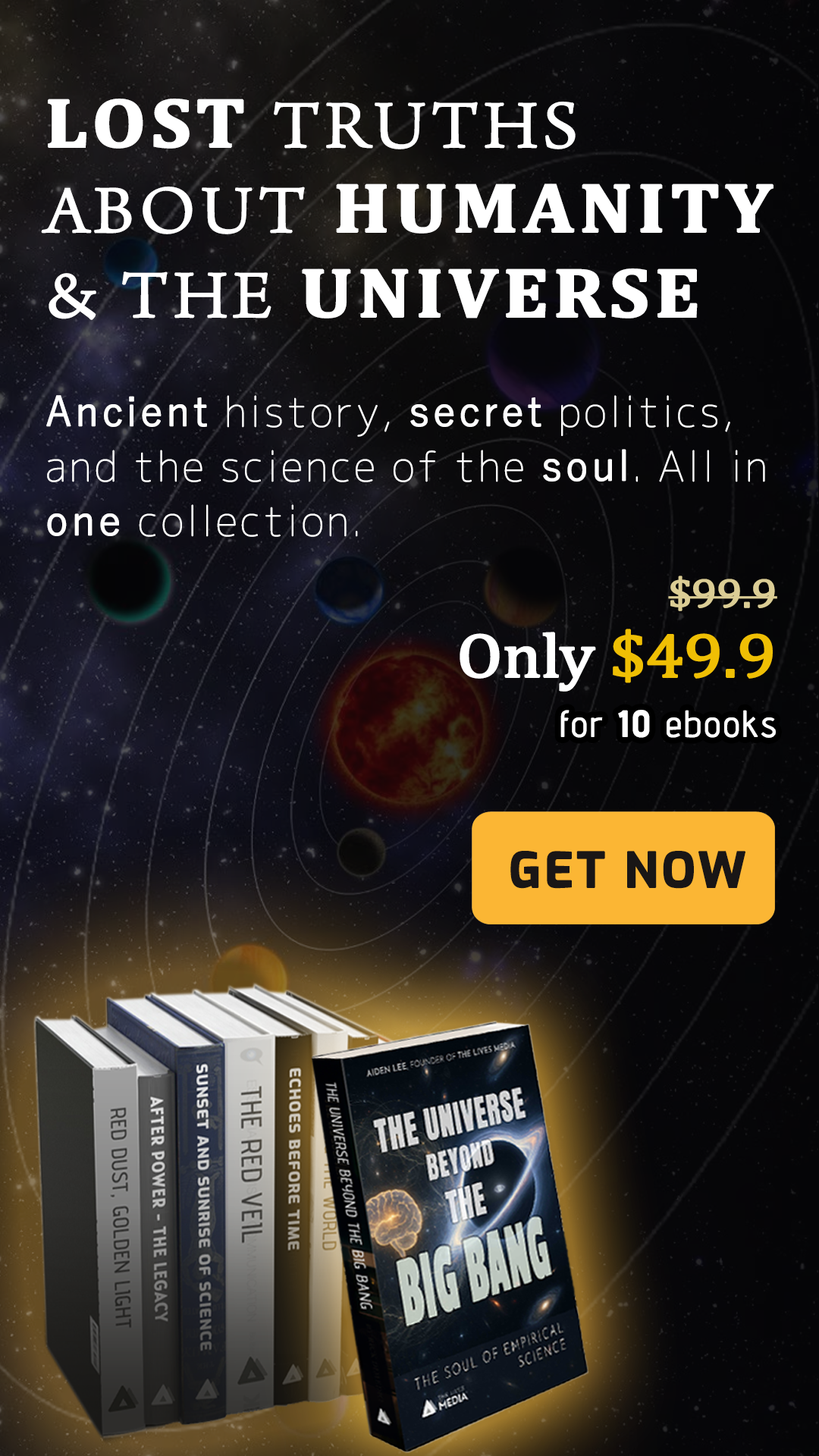
<style>
.page{position:relative;width:819px;height:1456px}
.page>*{position:absolute;margin:0}
.t1{font:69.8px/84.9px "ArnoPro-LightDisplay";letter-spacing:0.05em;color:#ffffff;font-weight:bold;scale:1.1 1}
.t2{font:69.8px/84.9px "Cambria-Bold";letter-spacing:0.05em;color:#ffffff;font-weight:bold;scale:1.1 1}
.t3{font:40.9px/54.6px "Chogokuboso-Gothic";letter-spacing:0.05em;color:#ffffff;font-weight:bold}
.t4{font:40.9px/54.6px "YuGothic-Regular";letter-spacing:0.05em;color:#ffffff;font-weight:bold}
.t5{font:40.9px/69.8px "Cambria";letter-spacing:-0.025em;color:#dbcd95;font-weight:bold;scale:1.11 1}
.t6{font:62.8px/69.8px "Cambria";letter-spacing:-0.025em;color:#ffffff;font-weight:bold;scale:1.11 1}
.t7{font:62.8px/69.8px "Cambria";letter-spacing:-0.025em;color:#efbf04;font-weight:bold;scale:1.11 1}
.t8{font:36.4px "AdventPro-Regular";letter-spacing:0.05em;color:#ffffff;font-weight:bold}
.t9{font:36.4px "AdventPro-Bold";letter-spacing:0.05em;color:#ffffff;font-weight:bold}
.t10{font:47.8px "Exo-Bold";letter-spacing:0.05em;color:#191616;font-weight:bold}
</style>
<div class="page">
<p class="t1" style="left:41px;top:99px;width:732px;height:221px"><span class="t2">LOST </span>TRUTHS <br>ABOUT <span class="t2">HUMANITY <br></span>&amp; THE <span class="t2">UNIVERSE</span></p>
<p class="t3" style="left:46px;top:395px;width:719px;height:142px"><span class="t4">Ancient</span> history, <span class="t4">secret</span> politics, and the science of the <span class="t4">soul</span>. All in <span class="t4">one</span> collection.</p>
<p class="t5" style="left:460px;top:576px;width:317px;height:116px;text-align:right">$99.9 <br><span class="t6">Only</span><span class="t7"> $49.9</span></p>
<p class="t8" style="left:560px;top:710px;width:216px;height:28px">for <span class="t9">10</span> ebooks</p>
<p class="t10" style="left:510px;top:851px;width:235px;height:38px">GET NOW</p>
</div>
